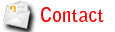
<style>
.page{position:relative;width:115px;height:32px;background:#ffffff}
.page>*{position:absolute;margin:0}
.t1{font:19px "BellGothicStd-Bold";color:#f90404}
</style>
<div class="page">
<p class="t1" style="left:41px;top:7px;width:63px;height:15px">Contact</p>
</div>
